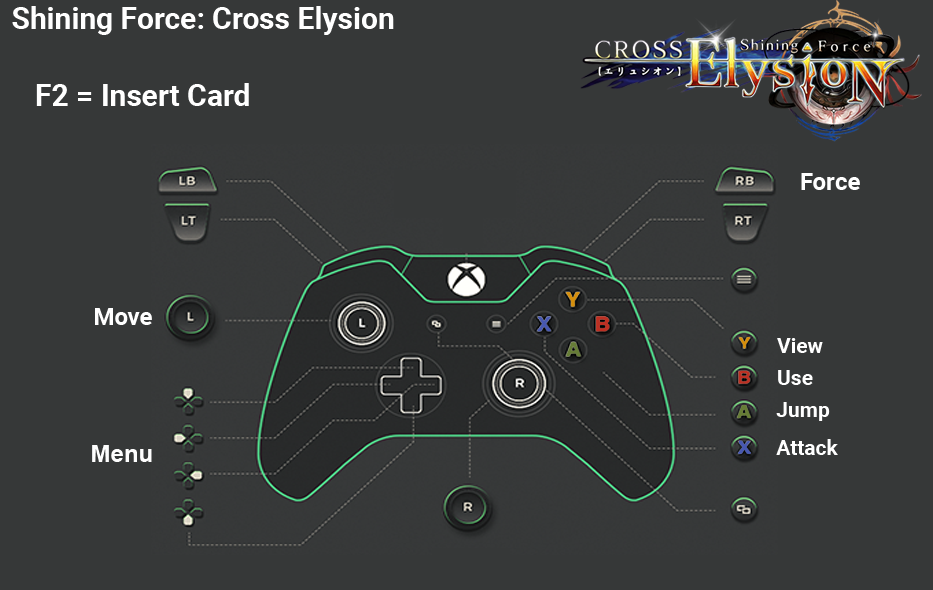
<style>
.page{position:relative;width:933px;height:590px;background:#363838}
.page>*{position:absolute;margin:0}
.t1{font:30px "Roboto-Bold";color:#ffffff}
.t2{font:24px "Roboto-Bold";color:#ffffff}
.t3{font:21px "Roboto-Bold";color:#ffffff}
.t4{font:24px "Arial-BoldMT";color:#fefefe}
</style>
<div class="page">
<p class="t1" style="left:12px;top:6px;width:382px;height:29px">Shining Force: Cross Elysion</p>
<p class="t1" style="left:36px;top:83px;width:213px;height:23px">F2 = Insert Card</p>
<p class="t2" style="left:801px;top:173px;width:59px;height:17px">Force</p>
<p class="t2" style="left:95px;top:308px;width:57px;height:17px">Move</p>
<p class="t3" style="left:777px;top:338px;width:46px;height:15px">View</p>
<p class="t3" style="left:778px;top:370px;width:35px;height:15px">Use</p>
<p class="t3" style="left:776px;top:402px;width:54px;height:19px">Jump</p>
<p class="t4" style="left:92px;top:445px;width:60px;height:17px">Menu</p>
<p class="t3" style="left:776px;top:439px;width:62px;height:16px">Attack</p>
</div>
